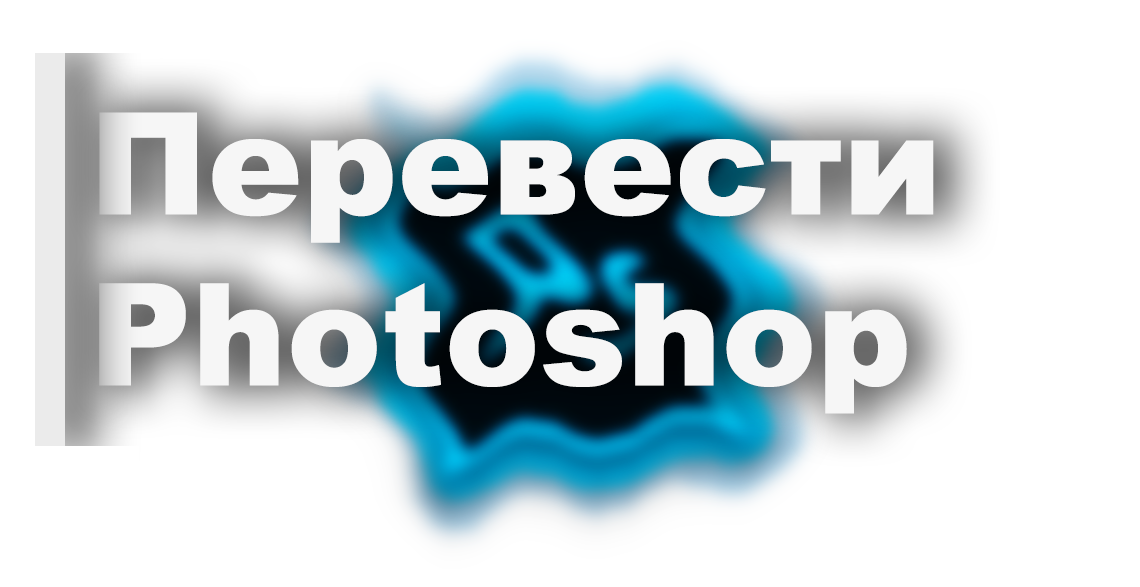
<style>
.page{position:relative;width:1140px;height:587px;background:#ffffff}
.page>*{position:absolute;margin:0}
.t1{font:142.3px "Arial-Black";color:#f6f6f6}
</style>
<div class="page">
<p class="t1" style="left:99px;top:112px;width:835px;height:302px">Перевести<br>Photoshop</p>
</div>
